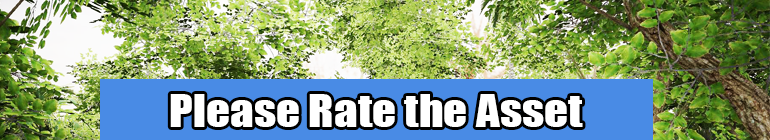
<style>
.page{position:relative;width:770px;height:140px}
.page>*{position:absolute;margin:0}
.t1{font:41.8px "Impact";color:#ffffff;scale:1.13 1}
</style>
<div class="page">
<p class="t1" style="left:170px;top:94px;width:413px;height:33px">Please Rate the Asset</p>
</div>
